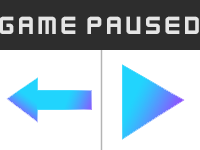
<style>
.page{position:relative;width:200px;height:150px;background:#ffffff}
.page>*{position:absolute;margin:0}
.t1{font:27.6px "KenVector-Future-Thin";color:#e5e5e5}
</style>
<div class="page">
<p class="t1" style="left:0px;top:16px;width:199px;height:18px">game paused</p>
</div>
